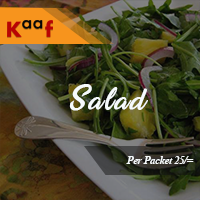
<style>
.page{position:relative;width:200px;height:200px}
.page>*{position:absolute;margin:0}
.t1{font:35px "SweetSensationsPersonalUse";letter-spacing:0.08em;color:#f6fafc;font-style:italic}
.t2{font:11px "TimesNewRomanPS-BoldItalicMT";letter-spacing:-0.04em;color:#f6fafc}
</style>
<div class="page">
<p class="t1" style="left:69px;top:84px;width:79px;height:27px">Salad</p>
<p class="t2" style="left:126px;top:156px;width:68px;height:8px">Per Packet 25/=</p>
</div>
